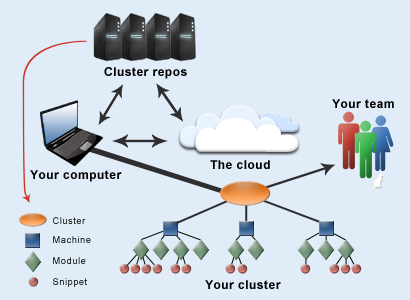
<style>
.page{position:relative;width:410px;height:300px;background:#e0ecf7}
.page>*{position:absolute;margin:0}
.t1{font:12px "Arial-BoldMT";letter-spacing:0.04em;color:#000000}
.t2{font:9.6px "ArialMT";letter-spacing:0.04em;color:#010101}
.t3{font:9.6px "ArialMT";letter-spacing:0.04em}
</style>
<div class="page">
<p class="t1" style="left:104px;top:67px;width:83px;height:12px">Cluster repos</p>
<p class="t1" style="left:332px;top:99px;width:62px;height:9px">Your team</p>
<p class="t1" style="left:210px;top:160px;width:60px;height:9px">The cloud</p>
<p class="t1" style="left:30px;top:170px;width:92px;height:12px">Your computer</p>
<p class="t2" style="left:53px;top:217px;width:33px;height:7px">Cluster</p>
<p class="t3" style="left:53px;top:236px;width:38px;height:7px">Machine</p>
<p class="t3" style="left:53px;top:257px;width:33px;height:7px">Module</p>
<p class="t3" style="left:53px;top:278px;width:34px;height:9px">Snippet</p>
<p class="t1" style="left:205px;top:280px;width:76px;height:9px">Your cluster</p>
</div>
